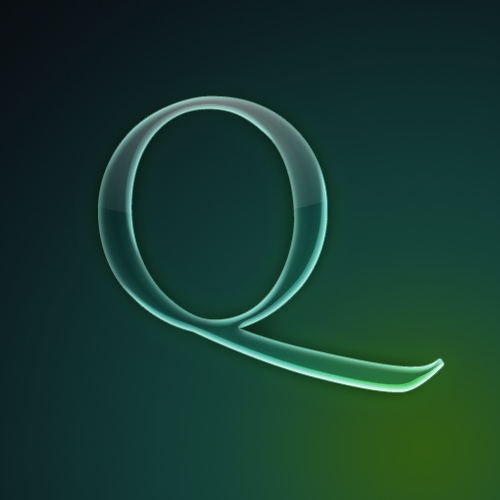
<style>
.page{position:relative;width:500px;height:500px}
.page>*{position:absolute;margin:0}
.t1{font:316.4px "ACaslonPro-Regular"}
</style>
<div class="page">
<p class="t1" style="left:99px;top:96px;width:345px;height:296px">Q</p>
</div>
